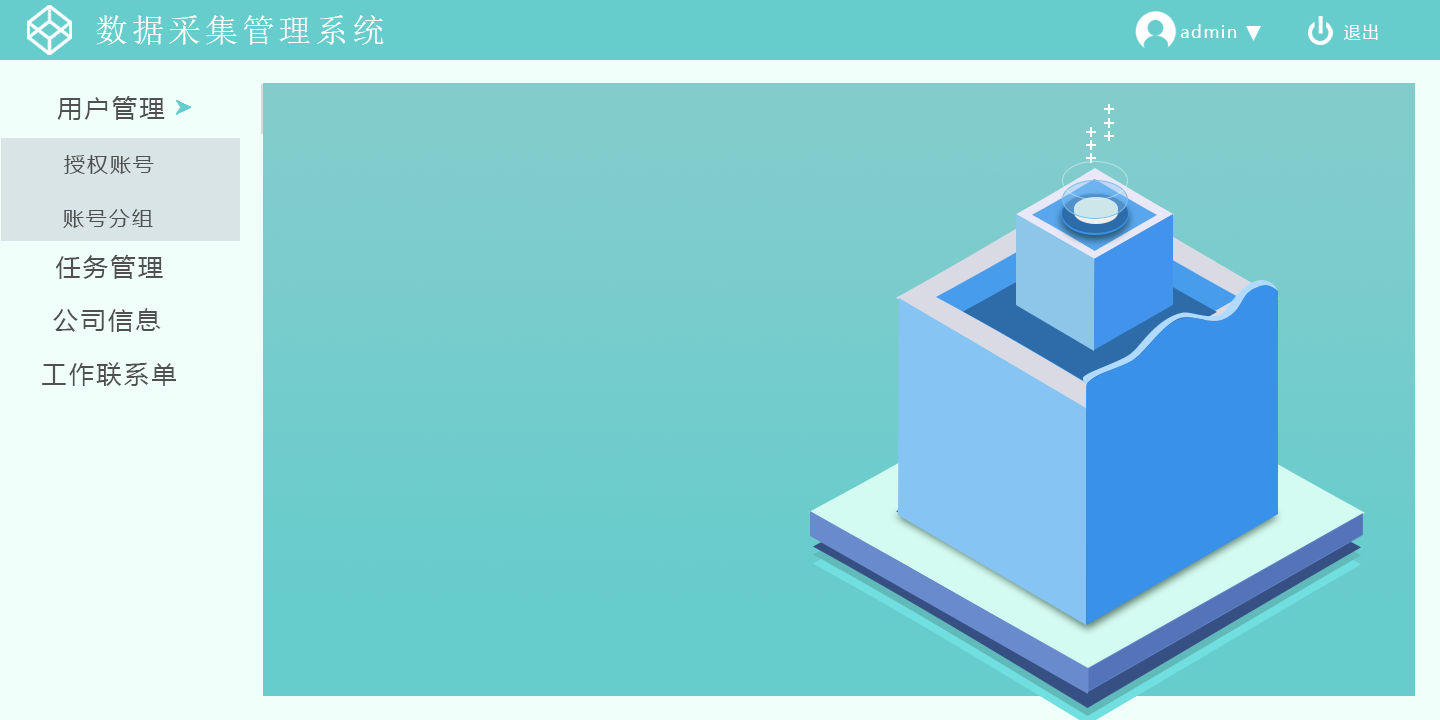
<style>
.page{position:relative;width:1440px;height:720px;background:#f0fff9}
.page>*{position:absolute;margin:0}
.t1{font:33.3px "SimSun";letter-spacing:0.1em;color:#ffffff}
.t2{font:16.7px "MicrosoftYaHei";letter-spacing:0.1em;color:#ffffff}
.t3{font:25px "MicrosoftYaHei";letter-spacing:0.1em;color:#505050}
.t4{font:20.8px "MicrosoftYaHei";letter-spacing:0.1em;color:#505050}
</style>
<div class="page">
<p class="t1" style="left:96px;top:15px;width:288px;height:30px">数据采集管理系统</p>
<p class="t2" style="left:1180px;top:24px;width:57px;height:14px">admin</p>
<p class="t2" style="left:1344px;top:24px;width:34px;height:16px">退出</p>
<p class="t3" style="left:57px;top:96px;width:108px;height:24px">用户管理</p>
<p class="t4" style="left:64px;top:155px;width:90px;height:19px">授权账号</p>
<p class="t4" style="left:63px;top:209px;width:90px;height:19px">账号分组</p>
<p class="t3" style="left:55px;top:255px;width:108px;height:24px">任务管理</p>
<p class="t3" style="left:53px;top:308px;width:108px;height:24px">公司信息</p>
<p class="t3" style="left:42px;top:362px;width:134px;height:24px">工作联系单</p>
</div>
